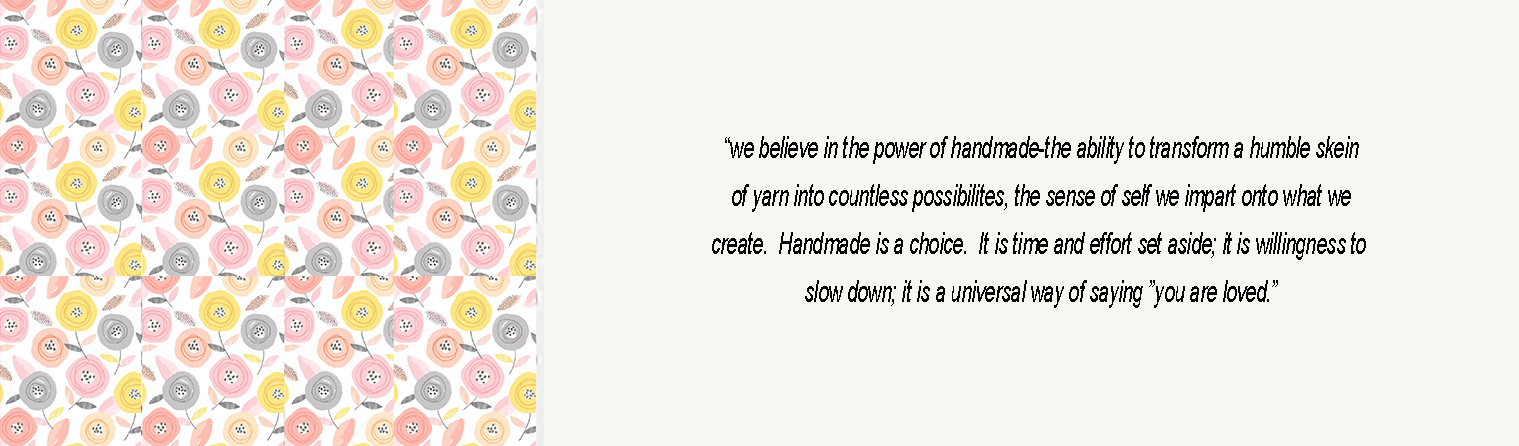
<style>
.page{position:relative;width:1519px;height:446px;background:#f6f7f1}
.page>*{position:absolute;margin:0}
.t1{font:30px/48px "Arial-ItalicMT";color:#000000;scale:0.62 1}
.t2{font:30px/14px "Arial-ItalicMT";color:#000000;scale:0.62 1}
</style>
<div class="page">
<p class="t1" style="left:712px;top:136px;width:654px;height:172px;text-align:center"><span class="t2">“we believe in the power of </span>handmade-the ability to transform a humble skein<br>of yarn into countless possibilites, the sense of self we impart onto what we<br>create.  Handmade is a choice.  It is time and effort set aside; it is willingness to <br>slow down; it is a universal way of saying ”you are loved.”</p>
</div>
